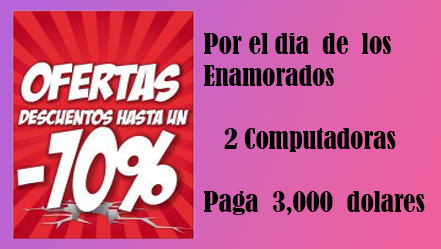
<style>
.page{position:relative;width:441px;height:249px}
.page>*{position:absolute;margin:0}
.t1{font:26.3px "BernardMT-Condensed";color:#000000;scale:1.05 1}
</style>
<div class="page">
<p class="t1" style="left:203px;top:33px;width:222px;height:182px">Por el dia  de  los <br>Enamorados<br><br>   2 Computadoras     <br><br>Paga  3,000  dolares</p>
</div>
